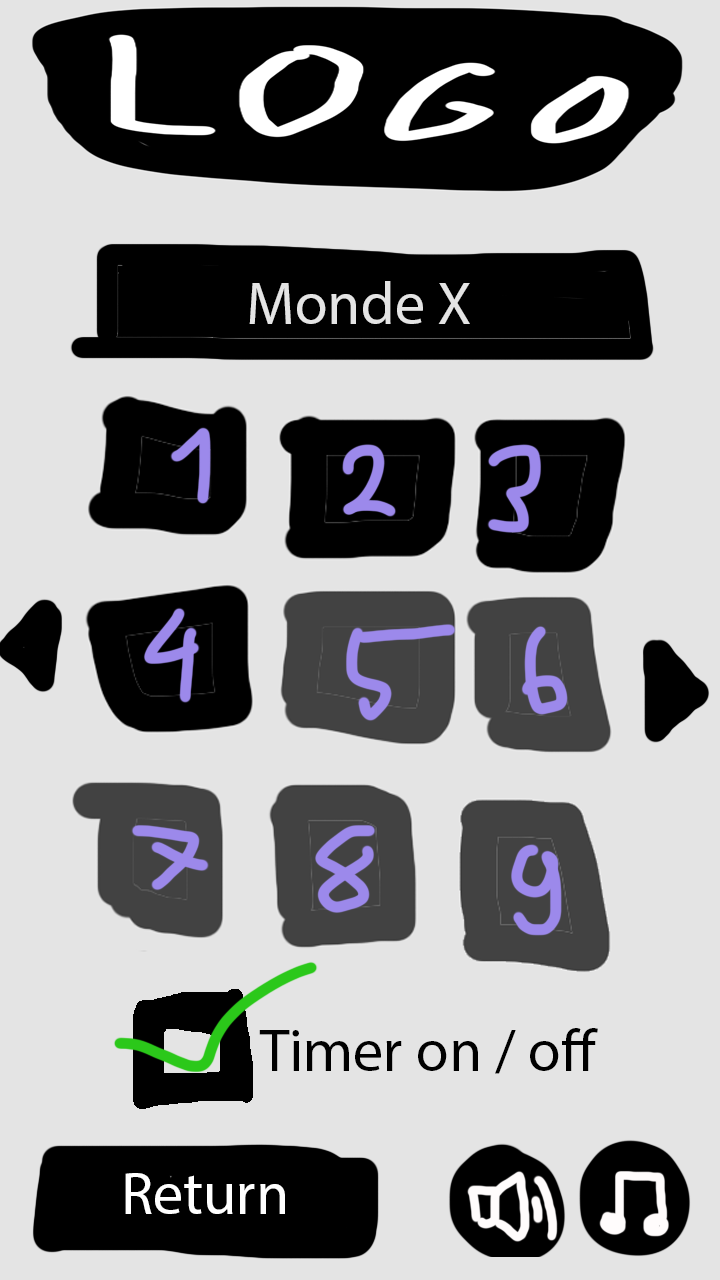
<style>
.page{position:relative;width:720px;height:1280px;background:#e4e4e4}
.page>*{position:absolute;margin:0}
.t1{font:60px "MyriadPro-Regular";color:#e4e4e4}
.t2{font:60px "MyriadPro-Regular";color:#000000}
.t3{font:60px "MyriadPro-Regular";color:#ffffff}
</style>
<div class="page">
<p class="t1" style="left:249px;top:281px;width:221px;height:43px">Monde X</p>
<p class="t2" style="left:259px;top:1028px;width:339px;height:46px">Timer on / off</p>
<p class="t3" style="left:125px;top:1173px;width:160px;height:41px">Return</p>
</div>
